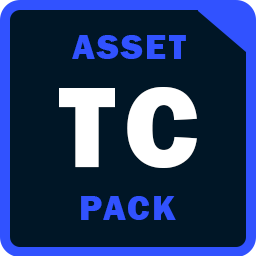
<style>
.page{position:relative;width:256px;height:256px;background:#001626}
.page>*{position:absolute;margin:0}
.t1{font:35.6px "FranklinGothic-Heavy";letter-spacing:0.075em;color:#3152ff}
.t2{font:119px "FranklinGothic-Heavy";letter-spacing:0.075em;color:#ffffff}
</style>
<div class="page">
<p class="t1" style="left:72px;top:35px;width:114px;height:24px">ASSET</p>
<p class="t2" style="left:59px;top:87px;width:138px;height:81px">TC</p>
<p class="t1" style="left:81px;top:196px;width:95px;height:24px">PACK</p>
</div>
